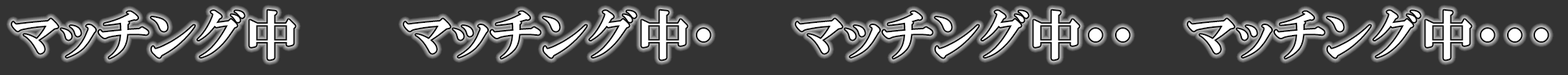
<style>
.page{position:relative;width:1568px;height:75px;background:#333333}
.page>*{position:absolute;margin:0}
.t1{font:53.7px "HGPMinchoE";color:#ffffff}
</style>
<div class="page">
<p class="t1" style="left:12px;top:10px;width:283px;height:50px">マッチング中</p>
<p class="t1" style="left:404px;top:10px;width:306px;height:50px">マッチング中・</p>
<p class="t1" style="left:796px;top:10px;width:333px;height:50px">マッチング中・・</p>
<p class="t1" style="left:1188px;top:10px;width:360px;height:50px">マッチング中・・・</p>
</div>
